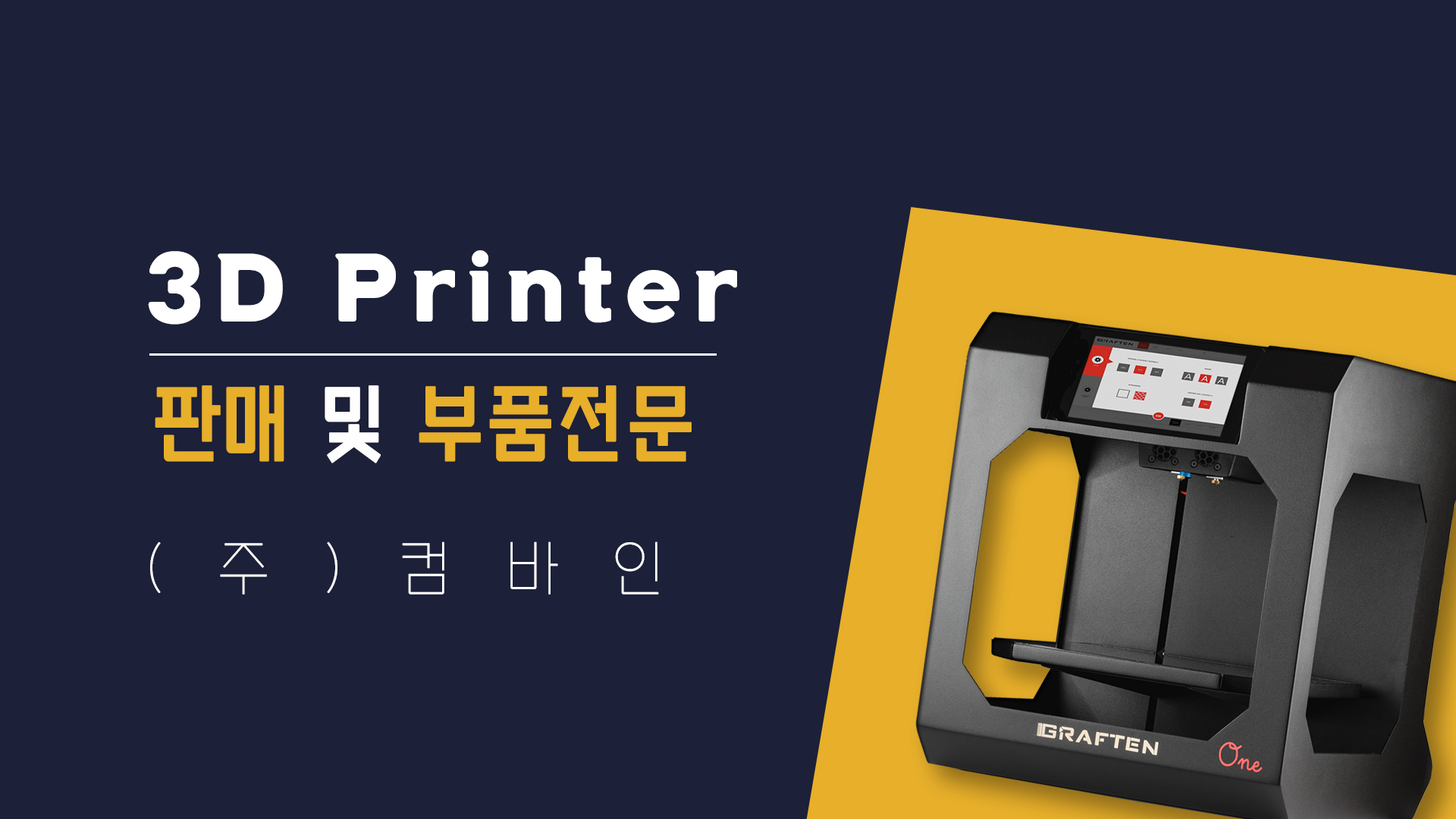
<style>
.page{position:relative;width:1456px;height:819px;background:#1c2038}
.page>*{position:absolute;margin:0}
.t1{font:101.4px "Tium";letter-spacing:0.12em;color:#ffffff}
.t2{font:87.9px "NIXGONB-Vb";color:#e7af2a;scale:0.91 1}
.t3{font:87.9px "NIXGONB-Vb";color:#fefefe;scale:0.91 1}
.t4{font:60.7px "NIXGONL-Vb";letter-spacing:0.88em;color:#ffffff}
</style>
<div class="page">
<p class="t1" style="left:148px;top:250px;width:589px;height:75px">3D Printer</p>
<p class="t2" style="left:155px;top:385px;width:537px;height:78px">판매 <span class="t3">및</span> 부품전문</p>
<p class="t4" style="left:150px;top:541px;width:509px;height:54px">(주)컴바인</p>
</div>
